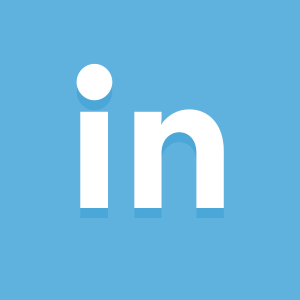
<style>
.page{position:relative;width:300px;height:300px;background:#60b2de}
.page>*{position:absolute;margin:0}
.t1{font:197.1px "Edmondsans-Bold";color:#ffffff}
</style>
<div class="page">
<p class="t1" style="left:76px;top:63px;width:148px;height:145px">in</p>
</div>
